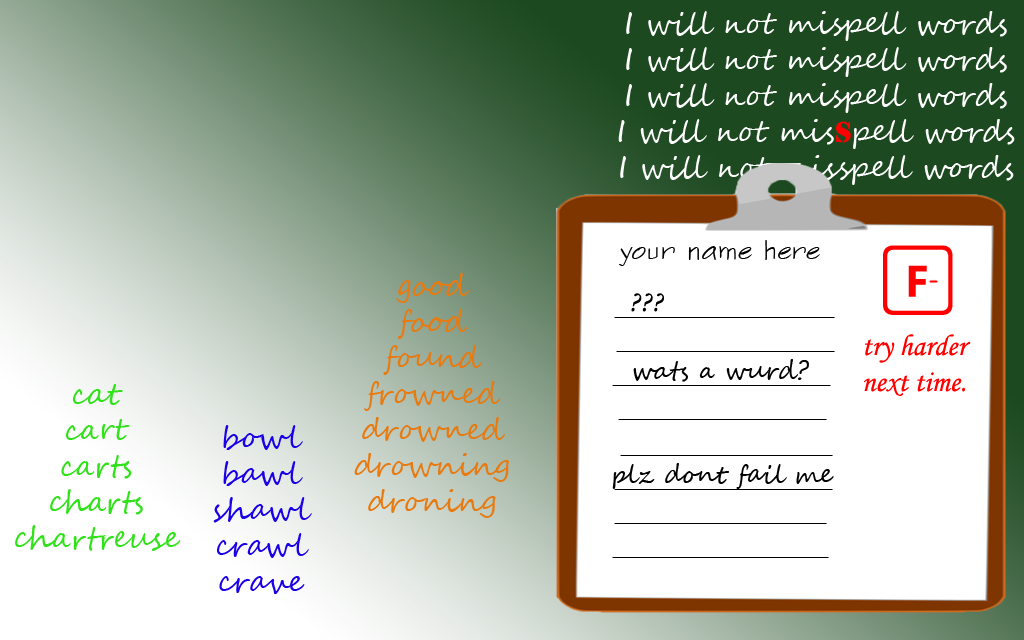
<style>
.page{position:relative;width:1024px;height:640px;background:#ffffff}
.page>*{position:absolute;margin:0}
.t1{font:30px "SegoeScript";color:#ffffff}
.t2{font:30px "Stencil";color:#ff0000}
.t3{font:30px "SegoeScript";color:#e77a10}
.t4{font:30px "MonotypeCorsiva";color:#000000}
.t5{font:30px "MonotypeCorsiva";color:#ff0000}
.t6{font:25px "SegoeScript";color:#000000}
.t7{font:30px "SegoeScript";color:#31e11a}
.t8{font:30px "SegoeScript";color:#1b00e7}
</style>
<div class="page">
<p class="t1" style="left:618px;top:11px;width:397px;height:174px;text-align:center">I will not mispell words<br>I will not mispell words<br>I will not mispell words<br>I will not mis<span class="t2">s</span>pell words<br>I will not misspell words</p>
<p class="t3" style="left:354px;top:273px;width:155px;height:245px;text-align:center">good<br>food<br>found<br>frowned<br>drowned<br>drowning<br>droning</p>
<p class="t4" style="left:631px;top:293px;width:33px;height:19px">???</p>
<p class="t5" style="left:864px;top:334px;width:107px;height:62px;text-align:center">try harder<br>next time.</p>
<p class="t6" style="left:633px;top:359px;width:176px;height:23px">wats a wurd?</p>
<p class="t7" style="left:15px;top:384px;width:166px;height:167px;text-align:center">cat<br>cart<br>carts<br>charts<br>chartreuse</p>
<p class="t8" style="left:213px;top:425px;width:99px;height:169px;text-align:center">bowl<br>bawl<br>shawl<br>crawl<br>crave</p>
</div>
